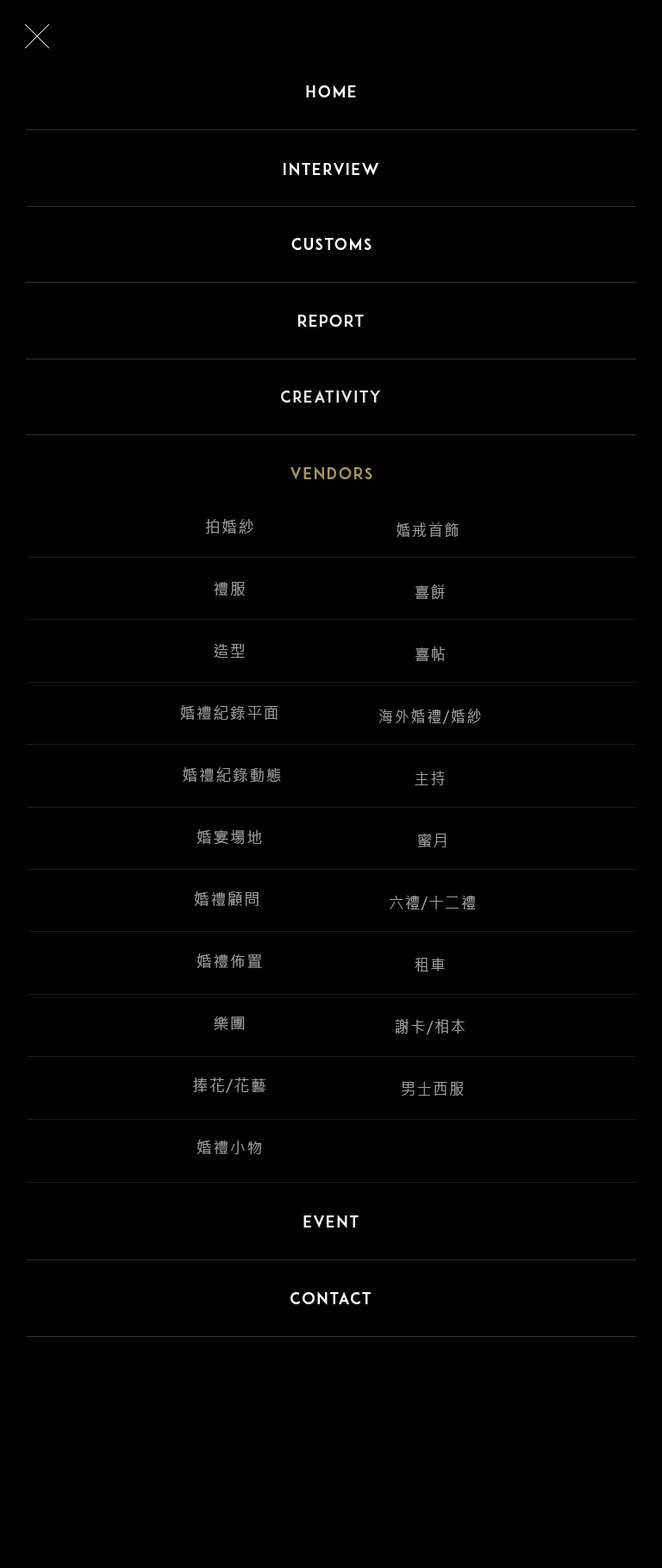
<style>
.page{position:relative;width:662px;height:1568px;background:#000000}
.page>*{position:absolute;margin:0}
.t1{font:15.5px "ADAM.CGPRO";letter-spacing:0.1em;color:#ffffff}
.t2{font:15.5px "ADAM.CGPRO";letter-spacing:0.1em;color:#e6e6e6}
.t3{font:15.5px "ADAM.CGPRO";letter-spacing:0.1em;color:#a99655}
.t4{font:15.5px/62.1px "MicrosoftJhengHeiRegular";letter-spacing:0.08em;color:#a0a0a0}
.t5{font:15.5px/62.1px "MicrosoftJhengHeiRegular";letter-spacing:0.08em;color:#a0a0a0;scale:0.97 1}
</style>
<div class="page">
<p class="t1" style="left:306px;top:85px;width:50px;height:12px">HOME</p>
<p class="t1" style="left:284px;top:162px;width:94px;height:14px">INTERVIEW</p>
<p class="t1" style="left:291px;top:238px;width:81px;height:12px">cUSTOMS</p>
<p class="t1" style="left:298px;top:315px;width:66px;height:12px">report</p>
<p class="t2" style="left:281px;top:390px;width:99px;height:13px">cREATIVITY</p>
<p class="t3" style="left:290px;top:466px;width:82px;height:14px">vendors</p>
<p class="t4" style="left:180px;top:519px;width:101px;height:635px;text-align:center">拍婚紗<br>禮服<br>造型<br>婚禮紀錄平面<br> 婚禮紀錄動態<br>婚宴場地<br>婚禮顧問 <br>婚禮佈置<br>樂團<br>捧花/花藝<br>婚禮小物</p>
<p class="t5" style="left:379px;top:522px;width:102px;height:574px;text-align:center">婚戒首飾 <br>喜餅<br>喜帖<br>海外婚禮/婚紗<br>主持<br> 蜜月<br> 六禮/十二禮<br>租車<br>謝卡/相本<br> 男士西服</p>
<p class="t1" style="left:303px;top:1215px;width:56px;height:13px">EVENT</p>
<p class="t1" style="left:290px;top:1291px;width:81px;height:14px">CONTACT</p>
</div>
